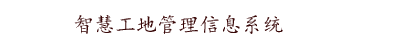
<style>
.page{position:relative;width:400px;height:47px;background:#ffffff}
.page>*{position:absolute;margin:0}
.t1{font:21px "¿¬Ìå-Regular";color:#380707}
</style>
<div class="page">
<p class="t1" style="left:74px;top:15px;width:209px;height:19px">智慧工地管理信息系统</p>
</div>
